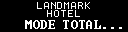
<style>
.page{position:relative;width:128px;height:32px;background:#000000}
.page>*{position:absolute;margin:0}
.t1{font:10px/8px "Terminal";letter-spacing:-0.05em;color:#ffffff}
.t2{font:12px "Terminal";letter-spacing:0.025em;color:#ffffff}
</style>
<div class="page">
<p class="t1" style="left:37px;top:2px;width:53px;height:15px;text-align:center">LANDMARK<br>HOTEL</p>
<p class="t2" style="left:25px;top:20px;width:97px;height:9px">MODE TOTAL...</p>
</div>
